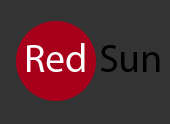
<style>
.page{position:relative;width:170px;height:124px;background:#333333}
.page>*{position:absolute;margin:0}
.t1{font:40px "MyriadPro-Regular";color:#fefefe}
.t2{font:40px "MyriadPro-Regular";color:#000000}
</style>
<div class="page">
<p class="t1" style="left:27px;top:43px;width:133px;height:29px">Red <span class="t2">Sun</span></p>
</div>
